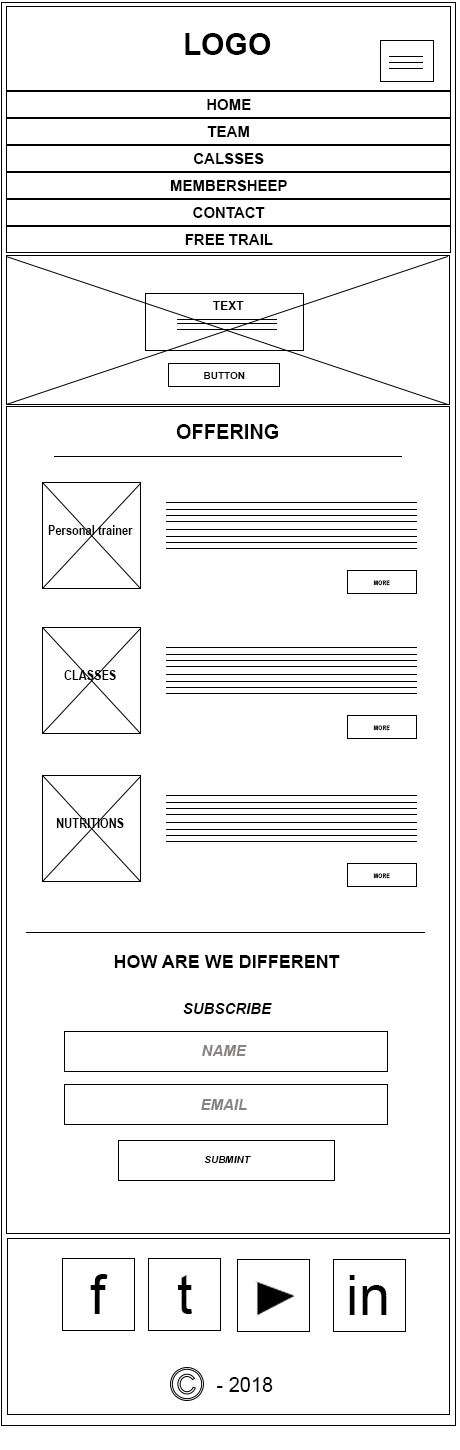
<style>
.page{position:relative;width:460px;height:1450px;background:#ffffff}
.page>*{position:absolute;margin:0}
.t1{font:30px "Arial-BoldMT";color:#000000}
.t2{font:15px "Arial-BoldMT";color:#000000}
.t3{font:12px "Arial-BoldMT";color:#000000}
.t4{font:10px "Arial-BoldMT";color:#000000}
.t5{font:20px "Arial-BoldMT";color:#000000}
.t6{font:12.8px "Arial-BoldMT";color:#000000;scale:0.86 1}
.t7{font:6.2px "Arial-BoldMT";scale:0.86 1}
.t8{font:18px "Arial-BoldMT";color:#000000}
.t9{font:15px "Arial-BoldItalicMT";color:#000000}
.t10{font:15px "Arial-BoldItalicMT";color:#868383}
.t11{font:10px "Arial-BoldItalicMT";color:#000000}
.t12{font:55.7px "ArialMT";color:#000000}
.t13{font:20px "ArialMT";color:#000000}
</style>
<div class="page">
<p class="t1" style="left:185px;top:33px;width:86px;height:22px">LOGO</p>
<p class="t2" style="left:207px;top:99px;width:44px;height:11px">HOME</p>
<p class="t2" style="left:207px;top:126px;width:42px;height:11px">TEAM</p>
<p class="t2" style="left:193px;top:153px;width:71px;height:11px">CALSSES</p>
<p class="t2" style="left:170px;top:180px;width:117px;height:11px">MEMBERSHEEP</p>
<p class="t2" style="left:193px;top:207px;width:72px;height:11px">CONTACT</p>
<p class="t2" style="left:185px;top:234px;width:88px;height:11px">FREE TRAIL</p>
<p class="t3" style="left:212px;top:301px;width:32px;height:9px">TEXT</p>
<p class="t4" style="left:204px;top:372px;width:41px;height:7px">BUTTON</p>
<p class="t5" style="left:176px;top:424px;width:102px;height:15px">OFFERING</p>
<p class="t6" style="left:48px;top:525px;width:85px;height:10px">Personal trainer</p>
<p class="t7" style="left:373px;top:580px;width:17px;height:6px">MORE</p>
<p class="t6" style="left:64px;top:670px;width:52px;height:10px">CLASSES</p>
<p class="t7" style="left:373px;top:725px;width:17px;height:6px">MORE</p>
<p class="t6" style="left:56px;top:818px;width:68px;height:10px">NUTRITIONS</p>
<p class="t7" style="left:373px;top:873px;width:17px;height:6px">MORE</p>
<p class="t8" style="left:114px;top:955px;width:226px;height:13px">HOW ARE WE DIFFERENT</p>
<p class="t9" style="left:183px;top:1003px;width:89px;height:11px">SUBSCRIBE</p>
<p class="t10" style="left:202px;top:1045px;width:45px;height:11px">NAME</p>
<p class="t10" style="left:201px;top:1099px;width:46px;height:11px">EMAIL</p>
<p class="t11" style="left:204px;top:1156px;width:47px;height:7px">SUBMINT</p>
<p class="t12" style="left:90px;top:1274px;width:18px;height:40px">f</p>
<p class="t12" style="left:178px;top:1275px;width:14px;height:39px">t</p>
<p class="t12" style="left:349px;top:1275px;width:38px;height:40px">in</p>
<p class="t13" style="left:217px;top:1377px;width:56px;height:15px">- 2018</p>
</div>
